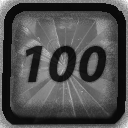
<style>
.page{position:relative;width:128px;height:128px}
.page>*{position:absolute;margin:0}
.t1{font:55px "MyriadPro-BoldIt";color:#000000}
</style>
<div class="page">
<p class="t1" style="left:26px;top:46px;width:80px;height:36px;opacity:0.91">100</p>
</div>
